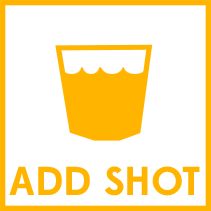
<style>
.page{position:relative;width:211px;height:211px;background:#ffffff}
.page>*{position:absolute;margin:0}
.t1{font:40.3px "Edmondsans-Bold";color:#ffb400}
</style>
<div class="page">
<p class="t1" style="left:9px;top:166px;width:191px;height:30px">ADD SHOT</p>
</div>
